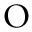
<style>
.page{position:relative;width:32px;height:32px;background:#ffffff}
.page>*{position:absolute;margin:0}
.t1{font:34px "AGaramondPro-Regular";color:#000000}
</style>
<div class="page">
<p class="t1" style="left:4px;top:4px;width:25px;height:24px">O</p>
</div>
